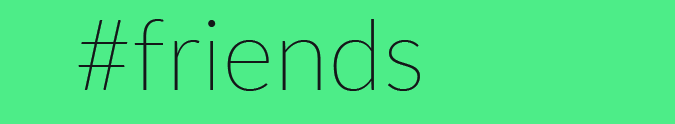
<style>
.page{position:relative;width:675px;height:124px;background:#4ded88}
.page>*{position:absolute;margin:0}
.t1{font:100px "Lato-Thin";color:#141819}
</style>
<div class="page">
<p class="t1" style="left:78px;top:19px;width:342px;height:72px">#friends</p>
</div>
